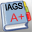
<style>
.page{position:relative;width:32px;height:32px}
.page>*{position:absolute;margin:0}
.t1{font:8.6px "ArialMT";color:#000000;scale:0.87 1}
.t2{font:11.3px "ArialMT";color:#e62b32}
</style>
<div class="page">
<p class="t1" style="left:5px;top:2px;width:18px;height:9px;rotate:-6deg">IAGS</p>
<p class="t2" style="left:10px;top:13px;width:14px;height:9px;rotate:-7deg">A+</p>
</div>
